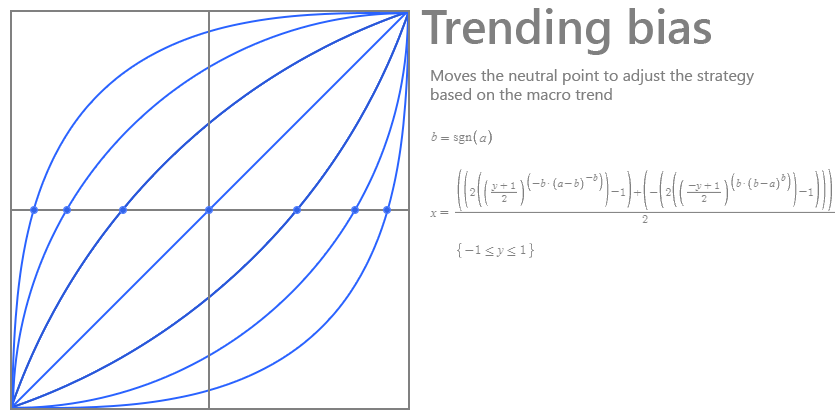
<style>
.page{position:relative;width:840px;height:420px;background:#ffffff}
.page>*{position:absolute;margin:0}
.t1{font:48px "SegoeUI-Semibold";color:#808080}
.t2{font:16px "SegoeUI";color:#808080}
</style>
<div class="page">
<p class="t1" style="left:421px;top:8px;width:290px;height:47px">Trending bias</p>
<p class="t2" style="left:431px;top:69px;width:323px;height:31px">Moves the neutral point to adjust the strategy<br>based on the macro trend</p>
</div>
